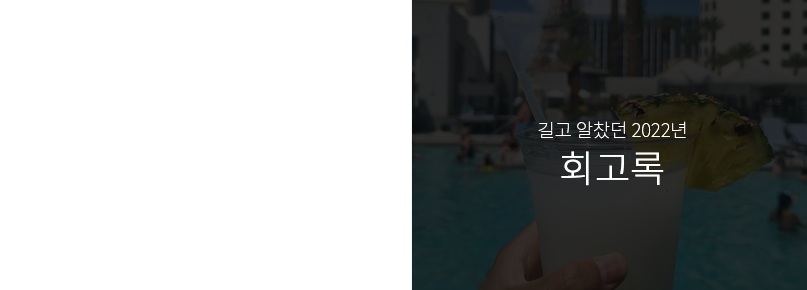
<style>
.page{position:relative;width:807px;height:290px;background:#ffffff}
.page>*{position:absolute;margin:0}
.t1{font:18.7px "NotoSansKR-Thin";color:#ffffff}
.t2{font:37.3px "NotoSansKR-Thin";color:#ffffff;font-weight:bold}
</style>
<div class="page">
<p class="t1" style="left:538px;top:121px;width:148px;height:18px">길고 알찼던 2022년</p>
<p class="t2" style="left:561px;top:151px;width:103px;height:35px">회고록</p>
</div>
